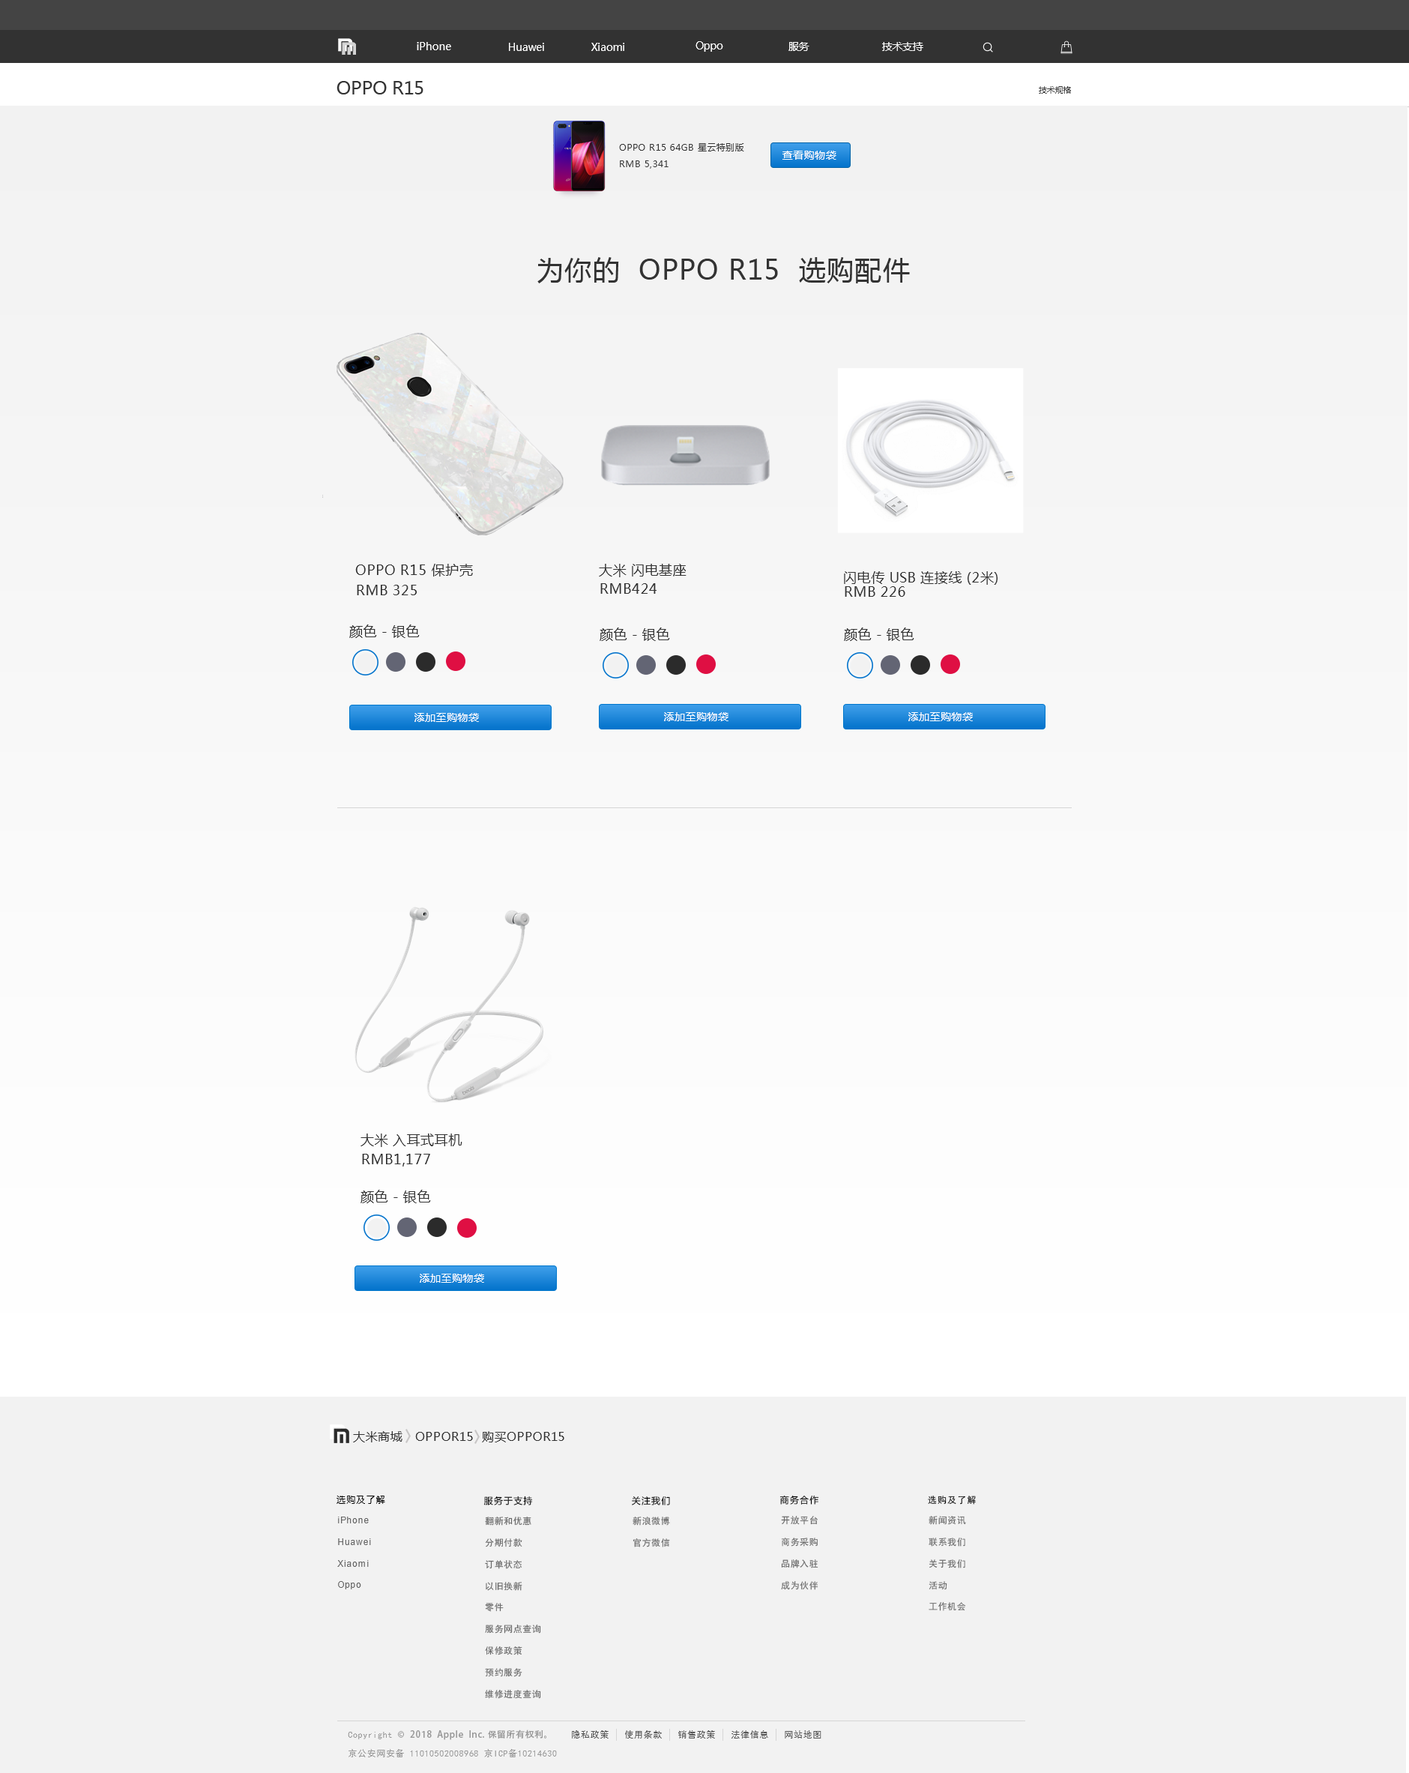
<style>
.page{position:relative;width:1409px;height:1773px;background:#f2f2f2}
.page>*{position:absolute;margin:0}
.t1{font:10.5px "MicrosoftYaHei";letter-spacing:-0.02em;color:#ffffff}
.t2{font:18px "MicrosoftYaHei";letter-spacing:-0.02em;color:#333333}
.t3{font:8.2px "MicrosoftYaHei";letter-spacing:-0.02em;color:#333333}
.t4{font:9px/16.5px "MicrosoftYaHei";letter-spacing:0.035em;color:#333333}
.t5{font:10.5px "MicrosoftYaHei";letter-spacing:0.035em;color:#ffffff}
.t6{font:27px "MicrosoftYaHei";letter-spacing:0.035em;color:#333333}
.t7{font:13.5px "MicrosoftYaHei";letter-spacing:0.035em;color:#333333}
.t8{font:12px "MicrosoftYaHei";letter-spacing:0.035em;color:#333333}
.t9{font:9px "MicrosoftYaHei";letter-spacing:0.1em;color:#000000}
.t10{font:9px "SimHei";letter-spacing:0.1em;color:#000000}
.t11{font:9px "ArialMT";letter-spacing:0.05em;color:#686868}
.t12{font:9px "SimHei";letter-spacing:0.05em;color:#686868}
.t13{font:9px "AdobeHeitiStd-Regular";letter-spacing:0.05em;color:#999999}
.t14{font:9px "SimHei";letter-spacing:0.05em;color:#999999}
.t15{font:9px "SimHei";letter-spacing:0.05em;color:#555555}
</style>
<div class="page">
<p class="t1" style="left:417px;top:42px;width:34px;height:8px">iPhone</p>
<p class="t1" style="left:696px;top:41px;width:27px;height:11px">Oppo</p>
<p class="t1" style="left:789px;top:42px;width:21px;height:9px">服务</p>
<p class="t1" style="left:882px;top:42px;width:41px;height:9px">技术支持</p>
<p class="t1" style="left:509px;top:43px;width:35px;height:8px">Huawei</p>
<p class="t1" style="left:591px;top:43px;width:33px;height:8px">Xiaomi</p>
<p class="t2" style="left:337px;top:81px;width:86px;height:13px">OPPO R15</p>
<p class="t3" style="left:1039px;top:86px;width:32px;height:8px">技术规格</p>
<p class="t4" style="left:619px;top:143px;width:125px;height:26px">OPPO R15 64GB 星云特别版<br>RMB 5,341</p>
<p class="t5" style="left:783px;top:151px;width:53px;height:9px">查看购物袋</p>
<p class="t6" style="left:537px;top:257px;width:373px;height:26px">为你的  OPPO R15  选购配件</p>
<p class="t7" style="left:355px;top:564px;width:118px;height:12px">OPPO R15 保护壳</p>
<p class="t7" style="left:599px;top:564px;width:88px;height:13px">大米 闪电基座</p>
<p class="t7" style="left:844px;top:571px;width:154px;height:14px">闪电传 USB 连接线 (2米)</p>
<p class="t7" style="left:357px;top:585px;width:60px;height:10px">RMB 325</p>
<p class="t7" style="left:600px;top:583px;width:57px;height:11px">RMB424</p>
<p class="t7" style="left:845px;top:586px;width:60px;height:11px">RMB 226</p>
<p class="t7" style="left:349px;top:624px;width:71px;height:14px">颜色 - 银色</p>
<p class="t7" style="left:600px;top:627px;width:70px;height:14px">颜色 - 银色</p>
<p class="t7" style="left:844px;top:627px;width:70px;height:14px">颜色 - 银色</p>
<p class="t5" style="left:414px;top:713px;width:65px;height:9px">添加至购物袋</p>
<p class="t5" style="left:664px;top:712px;width:65px;height:9px">添加至购物袋</p>
<p class="t5" style="left:908px;top:712px;width:65px;height:9px">添加至购物袋</p>
<p class="t7" style="left:361px;top:1133px;width:101px;height:14px">大米 入耳式耳机</p>
<p class="t7" style="left:362px;top:1154px;width:68px;height:12px">RMB1,177</p>
<p class="t7" style="left:361px;top:1190px;width:70px;height:13px">颜色 - 银色</p>
<p class="t5" style="left:420px;top:1273px;width:64px;height:9px">添加至购物袋</p>
<p class="t8" style="left:353px;top:1431px;width:211px;height:11px">大米商城   OPPOR15  购买OPPOR15</p>
<p class="t9" style="left:337px;top:1495px;width:48px;height:9px">选购及了解</p>
<p class="t9" style="left:483px;top:1495px;width:50px;height:10px">服务于支持</p>
<p class="t9" style="left:632px;top:1495px;width:38px;height:10px">关注我们</p>
<p class="t9" style="left:780px;top:1495px;width:39px;height:9px">商务合作</p>
<p class="t10" style="left:928px;top:1495px;width:48px;height:9px">选购及了解</p>
<p class="t11" style="left:338px;top:1516px;width:31px;height:7px">iPhone</p>
<p class="t12" style="left:485px;top:1516px;width:46px;height:9px">翻新和优惠</p>
<p class="t12" style="left:633px;top:1516px;width:37px;height:9px">新浪微博</p>
<p class="t12" style="left:781px;top:1516px;width:37px;height:9px">开放平台</p>
<p class="t12" style="left:929px;top:1516px;width:37px;height:9px">新闻资讯</p>
<p class="t11" style="left:338px;top:1538px;width:33px;height:7px">Huawei</p>
<p class="t12" style="left:485px;top:1538px;width:37px;height:9px">分期付款</p>
<p class="t12" style="left:633px;top:1538px;width:37px;height:9px">官方微信</p>
<p class="t12" style="left:781px;top:1537px;width:37px;height:9px">商务采购</p>
<p class="t12" style="left:929px;top:1537px;width:36px;height:9px">联系我们</p>
<p class="t11" style="left:337px;top:1560px;width:32px;height:7px">Xiaomi</p>
<p class="t12" style="left:485px;top:1560px;width:37px;height:9px">订单状态</p>
<p class="t12" style="left:781px;top:1559px;width:37px;height:9px">品牌入驻</p>
<p class="t12" style="left:929px;top:1559px;width:36px;height:9px">关于我们</p>
<p class="t11" style="left:338px;top:1581px;width:23px;height:8px">Oppo</p>
<p class="t12" style="left:486px;top:1582px;width:36px;height:9px">以旧换新</p>
<p class="t12" style="left:781px;top:1581px;width:37px;height:9px">成为伙伴</p>
<p class="t12" style="left:929px;top:1581px;width:18px;height:9px">活动</p>
<p class="t12" style="left:929px;top:1602px;width:37px;height:9px">工作机会</p>
<p class="t12" style="left:485px;top:1603px;width:19px;height:9px">零件</p>
<p class="t12" style="left:485px;top:1624px;width:56px;height:9px">服务网点查询</p>
<p class="t12" style="left:485px;top:1646px;width:37px;height:9px">保修政策</p>
<p class="t12" style="left:485px;top:1668px;width:37px;height:9px">预约服务</p>
<p class="t12" style="left:485px;top:1689px;width:56px;height:9px">维修进度查询</p>
<p class="t13" style="left:348px;top:1729px;width:198px;height:11px"><span class="t14">Copyright </span>©  2018  Apple  Inc. 保留所有权利。</p>
<p class="t15" style="left:572px;top:1730px;width:37px;height:8px">隐私政策</p>
<p class="t15" style="left:625px;top:1730px;width:37px;height:8px">使用条款</p>
<p class="t15" style="left:678px;top:1730px;width:37px;height:8px">销售政策</p>
<p class="t15" style="left:732px;top:1730px;width:36px;height:8px">法律信息</p>
<p class="t15" style="left:785px;top:1730px;width:36px;height:8px">网站地图</p>
<p class="t14" style="left:349px;top:1749px;width:208px;height:8px">京公安网安备 11010502008968 京ICP备10214630</p>
</div>
